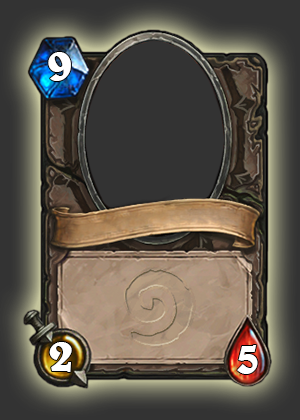
<style>
.page{position:relative;width:300px;height:420px;background:#333333}
.page>*{position:absolute;margin:0}
.t1{font:48px "BelweBT-Bold";color:#ffffff}
</style>
<div class="page">
<p class="t1" style="left:48px;top:52px;width:23px;height:29px">9</p>
<p class="t1" style="left:49px;top:342px;width:23px;height:30px">2</p>
<p class="t1" style="left:237px;top:345px;width:21px;height:29px">5</p>
</div>
